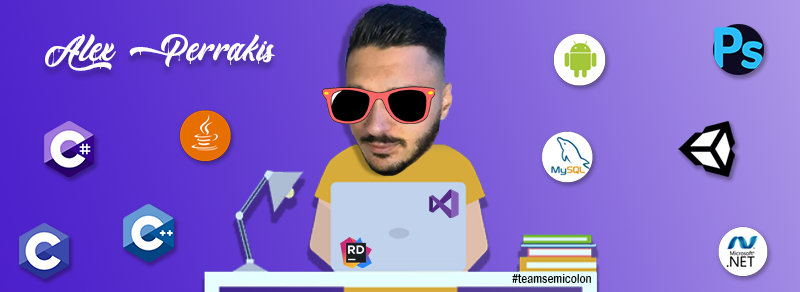
<style>
.page{position:relative;width:800px;height:292px}
.page>*{position:absolute;margin:0}
.t1{font:46.3px "MonkeyAct-PersonalUse";color:#ffffff}
.t2{font:13.3px "ArialRoundedMTBold";color:#000000;scale:0.75 1}
</style>
<div class="page">
<p class="t1" style="left:45px;top:34px;width:230px;height:37px">Alex Perrakis</p>
<p class="t2" style="left:512px;top:274px;width:80px;height:9px">#teamsemicolon</p>
</div>
